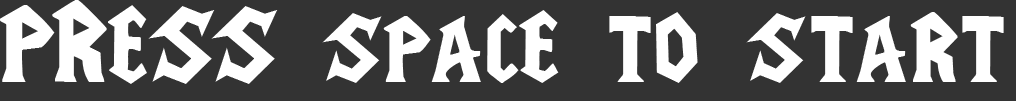
<style>
.page{position:relative;width:1016px;height:101px;background:#333333}
.page>*{position:absolute;margin:0}
.t1{font:96px "WarCraftFont";color:#ffffff}
</style>
<div class="page">
<p class="t1" style="left:0px;top:0px;width:1004px;height:84px">PRESS space to start</p>
</div>
